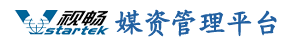
<style>
.page{position:relative;width:289px;height:45px;background:#ffffff}
.page>*{position:absolute;margin:0}
.t1{font:27px "KaiTi_GB2312";color:#2160a1;font-weight:bold}
</style>
<div class="page">
<p class="t1" style="left:115px;top:9px;width:162px;height:28px">媒资管理平台</p>
</div>
